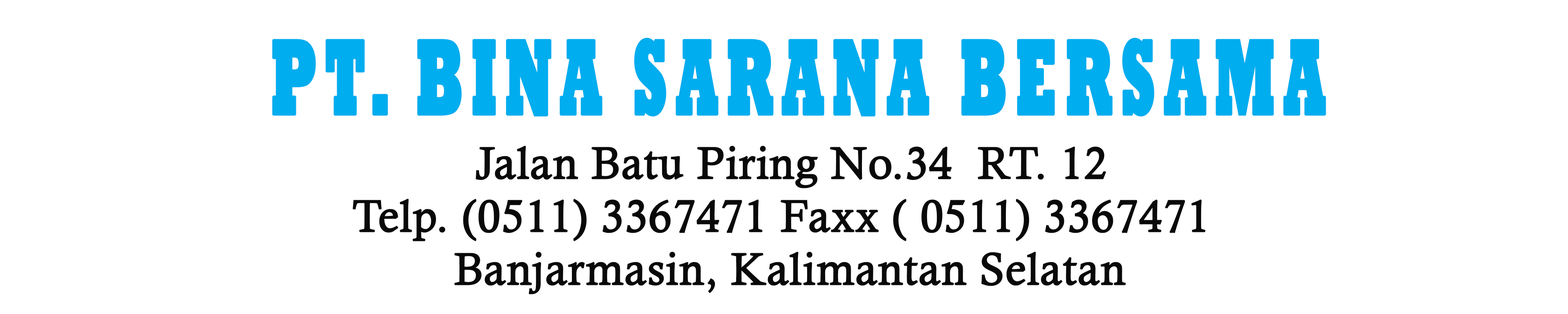
<style>
.page{position:relative;width:1568px;height:314px;background:#ffffff}
.page>*{position:absolute;margin:0}
.t1{font:109.9px "Rockwell-ExtraBold";letter-spacing:0.135em;color:#00adef;font-weight:bold;scale:0.5 1}
.t2{font:44.6px "CalistoMT";letter-spacing:-0.005em;color:#090909;font-weight:bold}
</style>
<div class="page">
<p class="t1" style="left:272px;top:38px;width:1054px;height:78px">PT. BINA SARANA BERSAMA</p>
<p class="t2" style="left:475px;top:145px;width:631px;height:43px">Jalan Batu Piring No.34  RT. 12</p>
<p class="t2" style="left:352px;top:198px;width:853px;height:43px">Telp. (0511) 3367471 Faxx ( 0511) 3367471</p>
<p class="t2" style="left:454px;top:251px;width:672px;height:43px">Banjarmasin, Kalimantan Selatan</p>
</div>
